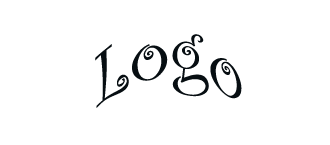
<style>
.page{position:relative;width:330px;height:145px;background:#ffffff}
.page>*{position:absolute;margin:0}
.t1{font:80px "CurlzMT";color:#070e12}
</style>
<div class="page">
<p class="t1" style="left:95px;top:34px;width:147px;height:74px">Logo</p>
</div>
